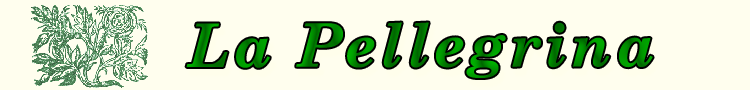
<style>
.page{position:relative;width:750px;height:90px;background:#fffeee}
.page>*{position:absolute;margin:0}
.t1{font:60px "CenturySchoolbook-BoldItalic";letter-spacing:0.064em}
</style>
<div class="page">
<p class="t1" style="left:186px;top:22px;width:467px;height:56px">La Pellegrina</p>
</div>
